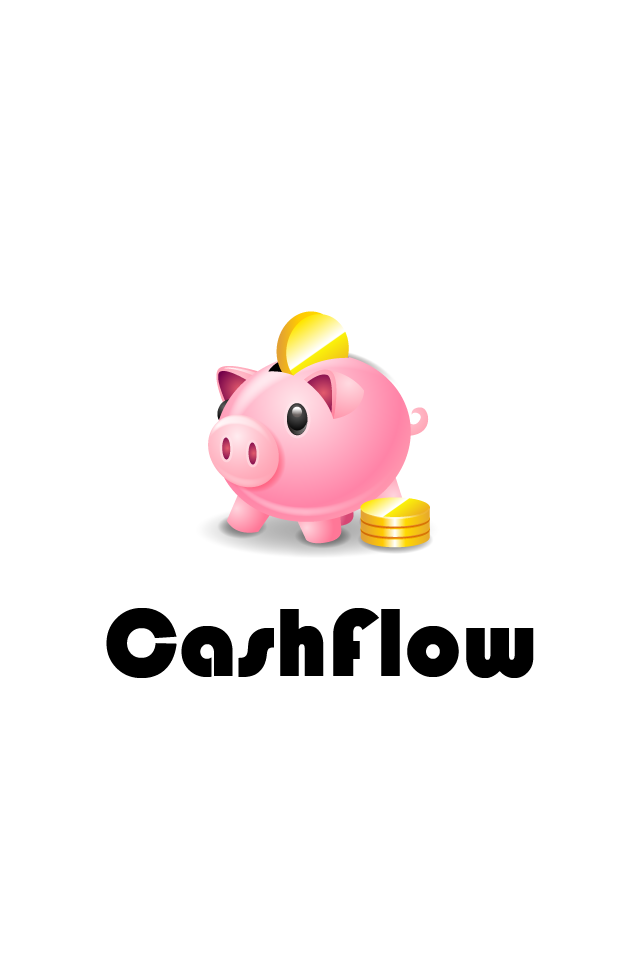
<style>
.page{position:relative;width:640px;height:960px;background:#ffffff}
.page>*{position:absolute;margin:0}
.t1{font:100px "Bauhaus93";color:#000000}
</style>
<div class="page">
<p class="t1" style="left:106px;top:608px;width:428px;height:70px">CashFlow</p>
</div>
